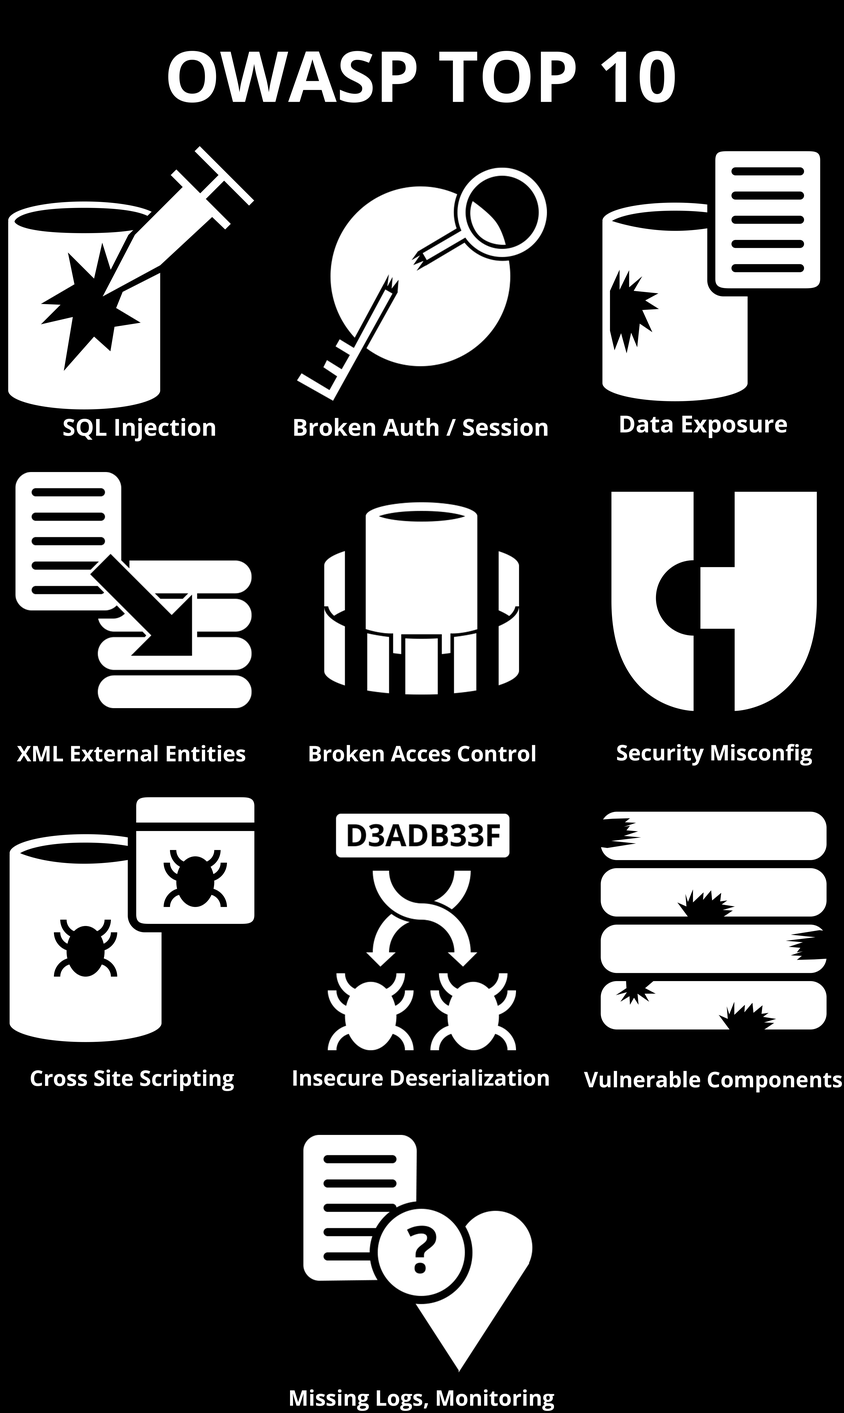
<style>
.page{position:relative;width:844px;height:1413px;background:#000000}
.page>*{position:absolute;margin:0}
.t1{font:21.5px "OpenSans-Bold";color:#ffffff}
</style>
<div class="page">
<p class="t1" style="left:17px;top:745px;width:228px;height:16px">XML External Entities</p>
<p class="t1" style="left:309px;top:745px;width:226px;height:16px">Broken Acces Control</p>
<p class="t1" style="left:617px;top:744px;width:195px;height:21px">Security Misconfig</p>
<p class="t1" style="left:31px;top:1069px;width:203px;height:22px">Cross Site Scripting</p>
<p class="t1" style="left:293px;top:1069px;width:256px;height:17px">Insecure Deserialization</p>
<p class="t1" style="left:584px;top:1071px;width:258px;height:21px">Vulnerable Components</p>
<p class="t1" style="left:290px;top:1389px;width:264px;height:22px">Missing Logs, Monitoring</p>
</div>
